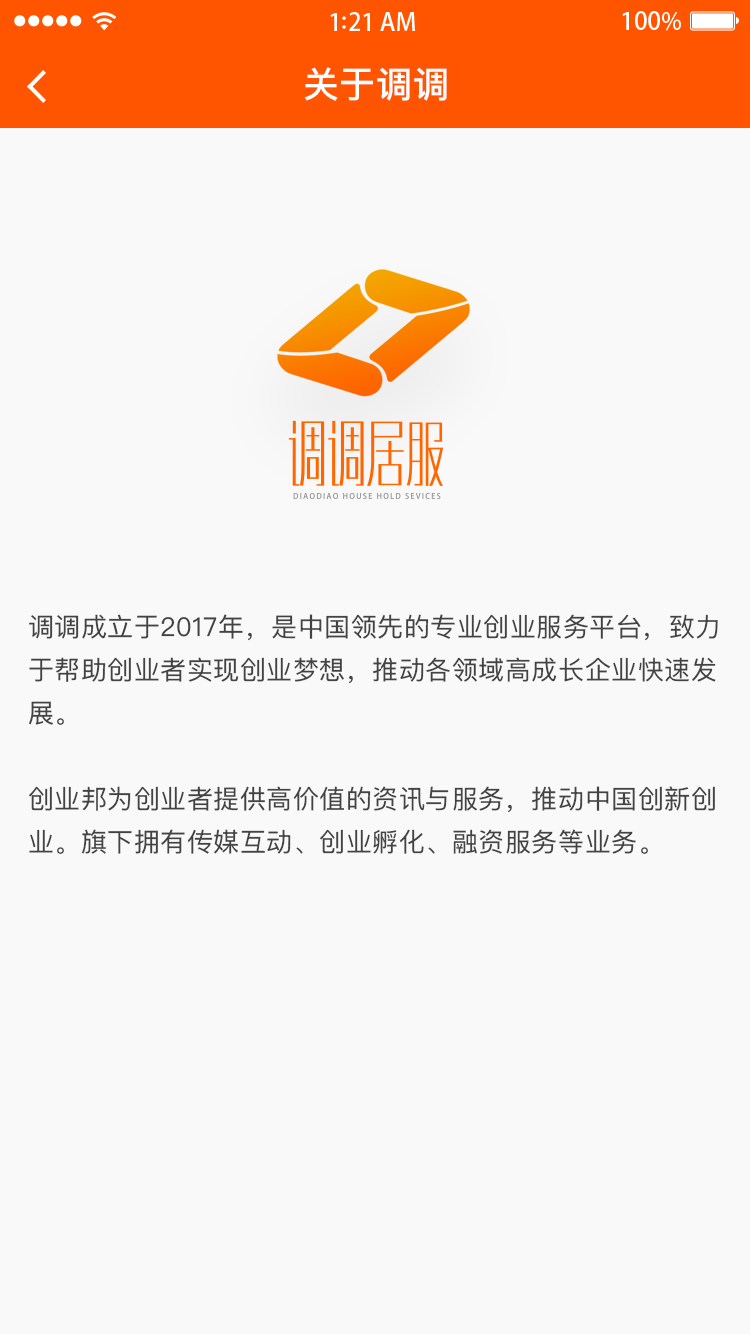
<style>
.page{position:relative;width:750px;height:1334px;background:#f9f9f9}
.page>*{position:absolute;margin:0}
.t1{font:36px "PingFangSC-Medium";letter-spacing:0.02em;color:#ffffff}
.t2{font:26px/47px "PingFangSC-Regular";letter-spacing:0.02em;color:#434343}
</style>
<div class="page">
<p class="t1" style="left:304px;top:67px;width:143px;height:34px">关于调调</p>
<p class="t2" style="left:29px;top:614px;width:689px;height:240px">调调成立于2017年，是中国领先的专业创业服务平台，致力<br>于帮助创业者实现创业梦想，推动各领域高成长企业快速发<br>展。<br><br>创业邦为创业者提供高价值的资讯与服务，推动中国创新创<br>业。旗下拥有传媒互动、创业孵化、融资服务等业务。</p>
</div>
